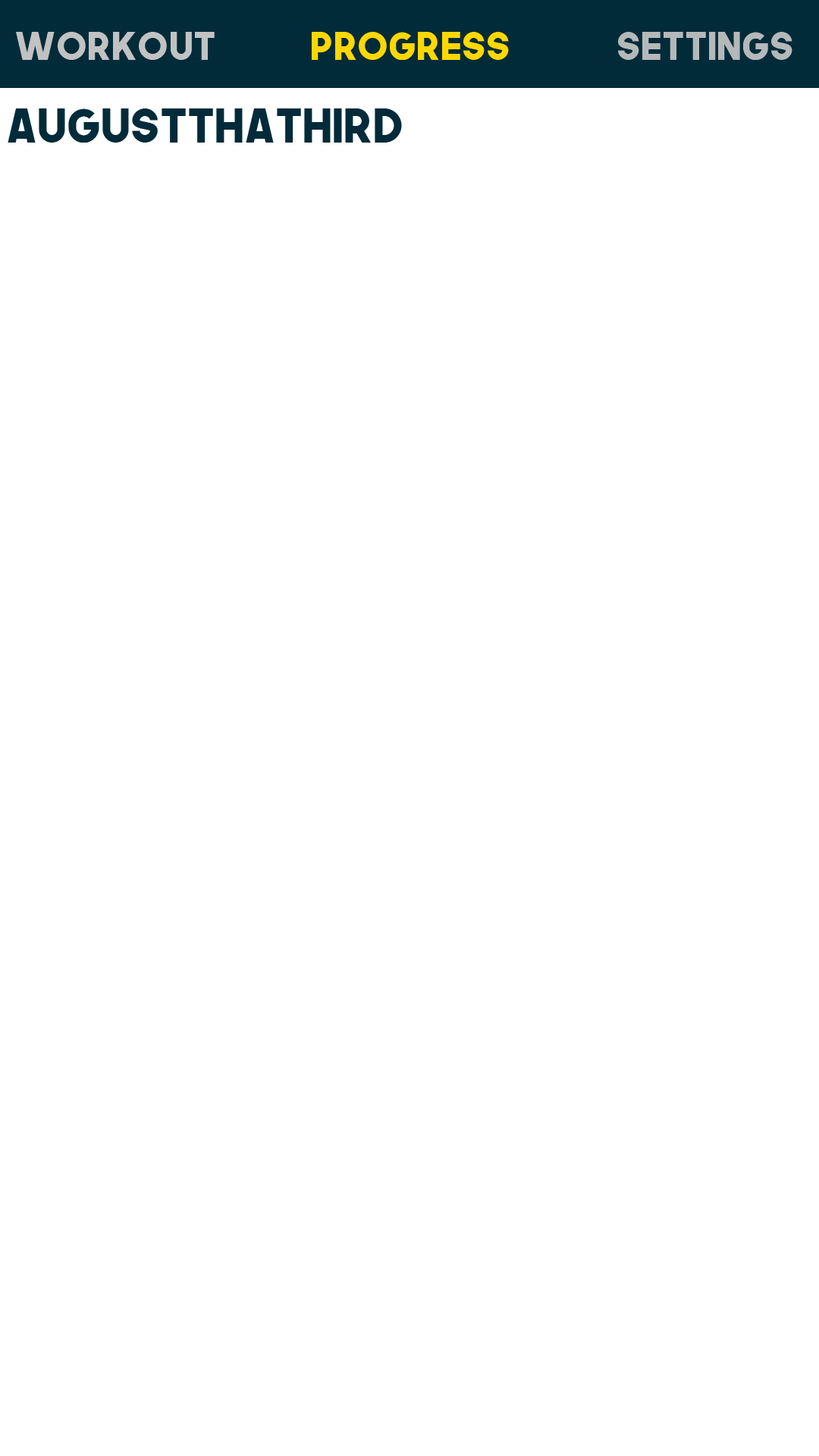
<style>
.page{position:relative;width:819px;height:1456px;background:#ffffff}
.page>*{position:absolute;margin:0}
.t1{font:38.3px "TheNextFont";color:#c2c2c2}
.t2{font:38.3px "TheNextFont";color:#ffd700}
.t3{font:38.3px "TheNextFont";color:#b5b8b9}
.t4{font:46.4px "TheNextFont";color:#022b3a}
</style>
<div class="page">
<p class="t1" style="left:16px;top:32px;width:199px;height:28px">Workout</p>
<p class="t2" style="left:312px;top:32px;width:197px;height:28px">Progress</p>
<p class="t3" style="left:618px;top:32px;width:174px;height:28px">Settings</p>
<p class="t4" style="left:8px;top:108px;width:394px;height:35px">AugustThaThird</p>
</div>
